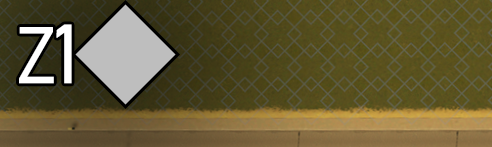
<style>
.page{position:relative;width:492px;height:147px}
.page>*{position:absolute;margin:0}
.t1{font:83.5px "Gidole-Regular";letter-spacing:-0.12em;color:#ffffff;font-weight:bold}
</style>
<div class="page">
<p class="t1" style="left:19px;top:24px;width:53px;height:60px">Z1</p>
</div>
